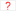
<style>
.page{position:relative;width:16px;height:11px;background:#fefefe}
.page>*{position:absolute;margin:0}
.t1{font:11px "ArialMT"}
</style>
<div class="page">
<p class="t1" style="left:5px;top:1px;width:6px;height:9px">?</p>
</div>
